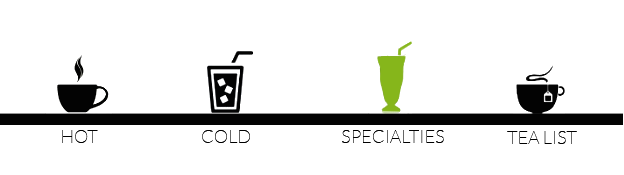
<style>
.page{position:relative;width:624px;height:175px;background:#ffffff}
.page>*{position:absolute;margin:0}
.t1{font:18px "Lato-Hairline";color:#000000}
</style>
<div class="page">
<p class="t1" style="left:62px;top:130px;width:36px;height:13px">HOT</p>
<p class="t1" style="left:202px;top:130px;width:48px;height:13px">COLD</p>
<p class="t1" style="left:342px;top:130px;width:102px;height:13px">SPECIALTIES</p>
<p class="t1" style="left:507px;top:131px;width:70px;height:13px">TEA LIST</p>
</div>
